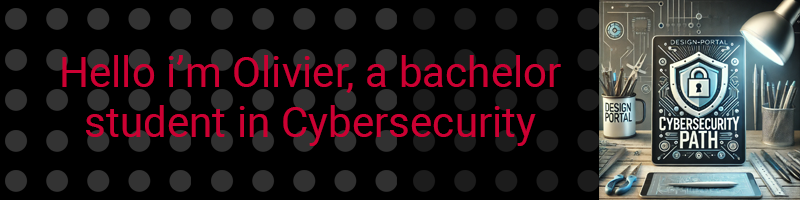
<style>
.page{position:relative;width:800px;height:200px;background:#000000}
.page>*{position:absolute;margin:0}
.t1{font:42.2px "Roboto-Regular";color:#cc0033}
</style>
<div class="page">
<p class="t1" style="left:62px;top:55px;width:499px;height:91px;text-align:center">Hello i’m Olivier, a bachelor<br>student in Cybersecurity</p>
</div>
